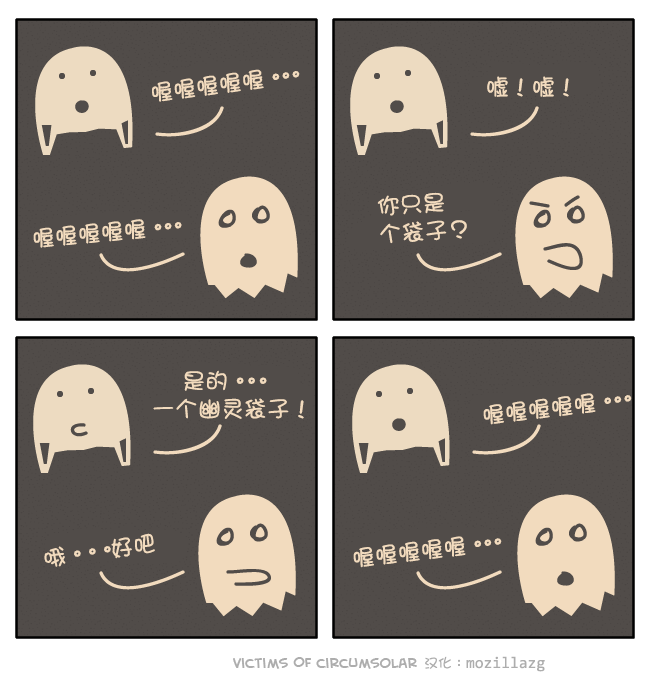
<style>
.page{position:relative;width:650px;height:680px;background:#514c49}
.page>*{position:absolute;margin:0}
.t1{font:23px "DFGirl";color:#f2dbbe}
.t2{font:23px "DFGirl";letter-spacing:-0.56em;color:#f2dbbe}
.t3{font:23px/28px "DFGirl";color:#f2dbbe}
.t4{font:23px/28px "DFGirl";letter-spacing:-0.5em;color:#f2dbbe}
.t5{font:23px "DFGirl";letter-spacing:-0.34em;color:#f2dbbe}
</style>
<div class="page">
<p class="t1" style="left:152px;top:69px;width:148px;height:33px;rotate:-7deg">喔喔喔喔喔<span class="t2">。。。</span></p>
<p class="t1" style="left:487px;top:76px;width:82px;height:21px">嘘！嘘！</p>
<p class="t3" style="left:377px;top:192px;width:90px;height:52px;rotate:-4deg">你只是<br>个袋子？</p>
<p class="t1" style="left:33px;top:219px;width:149px;height:29px;rotate:-5deg">喔喔喔喔喔<span class="t2">。。。</span></p>
<p class="t3" style="left:153px;top:370px;width:151px;height:49px">是的<span class="t4">。。。<br></span>一个幽灵袋子！</p>
<p class="t1" style="left:483px;top:393px;width:149px;height:32px;rotate:-7deg">喔喔喔喔喔<span class="t2">。。。</span></p>
<p class="t5" style="left:44px;top:533px;width:111px;height:34px;rotate:-8deg"><span class="t1">哦</span>。。。     <span class="t1">好吧</span></p>
<p class="t1" style="left:353px;top:536px;width:149px;height:32px;rotate:-7deg">喔喔喔喔喔<span class="t2">。。。</span></p>
</div>
